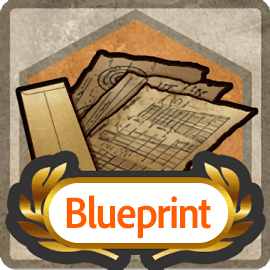
<style>
.page{position:relative;width:270px;height:270px}
.page>*{position:absolute;margin:0}
.t1{font:45px "AdobeClean-Bold";letter-spacing:-0.04em;color:#ff5d00;scale:0.9 1}
</style>
<div class="page">
<p class="t1" style="left:66px;top:195px;width:145px;height:44px">Blueprint</p>
</div>
